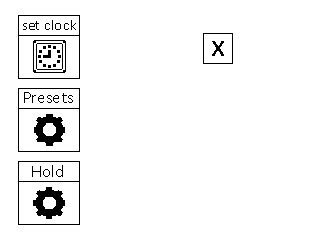
<style>
.page{position:relative;width:320px;height:240px;background:#ffffff}
.page>*{position:absolute;margin:0}
.t1{font:15.2px "Calibri";color:#000000}
.t2{font:31.7px "Calibri";color:#000000}
.t3{font:17.2px "Calibri";color:#000000}
</style>
<div class="page">
<p class="t1" style="left:23px;top:20px;width:53px;height:10px">set clock</p>
<p class="t2" style="left:212px;top:41px;width:12px;height:15px">x</p>
<p class="t3" style="left:24px;top:92px;width:49px;height:11px">Presets</p>
<p class="t3" style="left:32px;top:165px;width:31px;height:12px">Hold</p>
</div>
